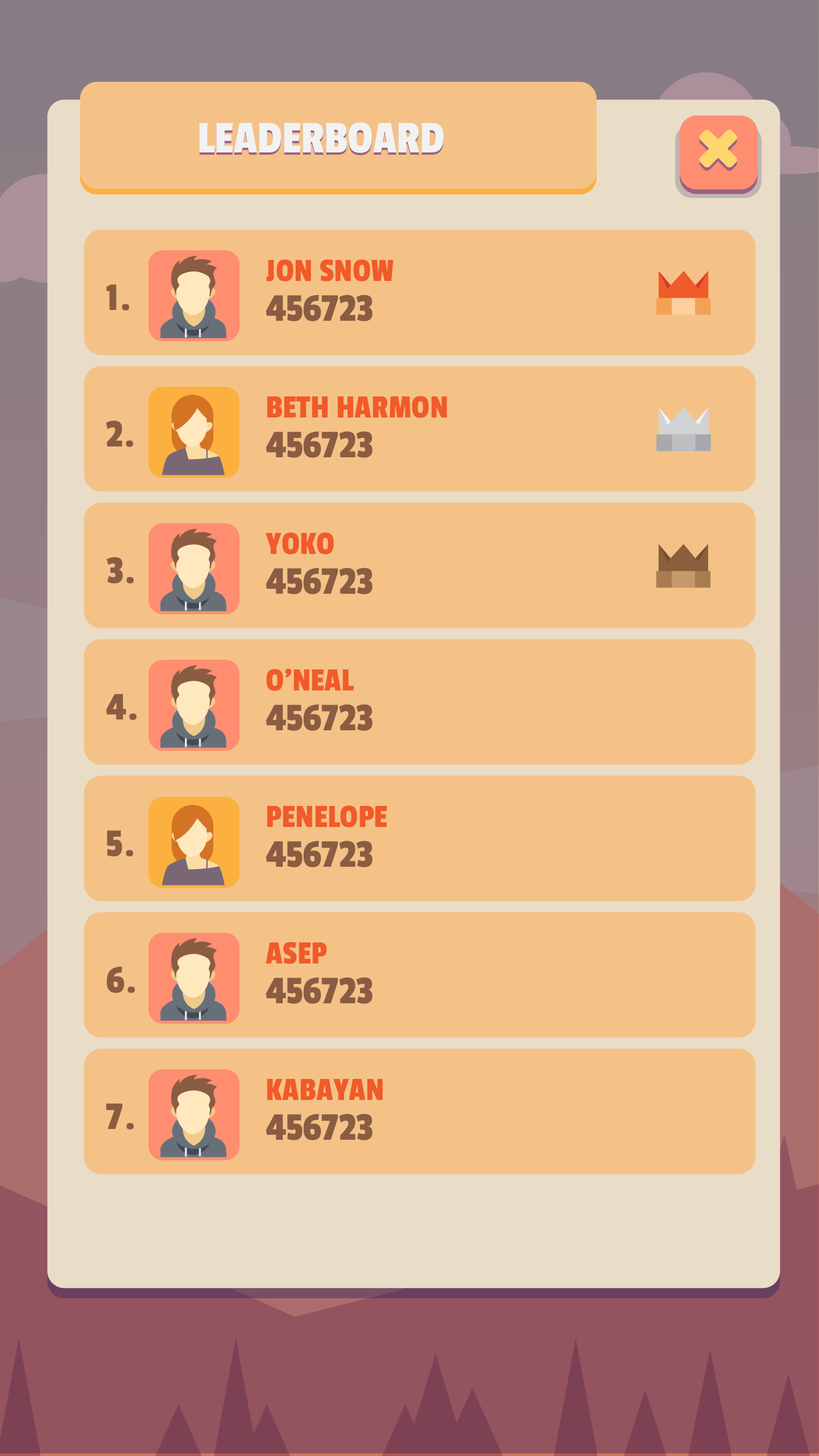
<style>
.page{position:relative;width:819px;height:1456px;background:#f4c287}
.page>*{position:absolute;margin:0}
.t1{font:47.2px "PassionOne-Regular";color:#ffffff}
.t2{font:47.2px "PassionOne-Regular";color:#f1f2f2}
.t3{font:34px "PassionOne-Regular";color:#f15a29}
.t4{font:40.9px "PassionOne-Regular";color:#8a5c42}
</style>
<div class="page">
<p class="t1" style="left:199px;top:122px;width:245px;height:31px">LEADERBOARD</p>
<p class="t2" style="left:199px;top:125px;width:245px;height:30px">LEADERBOARD</p>
<p class="t2" style="left:199px;top:122px;width:245px;height:31px">LEADERBOARD</p>
<p class="t3" style="left:266px;top:259px;width:128px;height:23px">JON SNOW</p>
<p class="t4" style="left:106px;top:284px;width:23px;height:27px">1.</p>
<p class="t4" style="left:266px;top:295px;width:107px;height:26px">456723</p>
<p class="t3" style="left:267px;top:396px;width:180px;height:22px">BETH HARMON</p>
<p class="t4" style="left:106px;top:420px;width:27px;height:27px">2.</p>
<p class="t4" style="left:266px;top:431px;width:107px;height:27px">456723</p>
<p class="t3" style="left:266px;top:532px;width:68px;height:23px">YOKO</p>
<p class="t4" style="left:106px;top:557px;width:28px;height:27px">3.</p>
<p class="t4" style="left:266px;top:568px;width:107px;height:26px">456723</p>
<p class="t3" style="left:266px;top:668px;width:88px;height:23px">O’NEAL</p>
<p class="t4" style="left:106px;top:694px;width:30px;height:26px">4.</p>
<p class="t4" style="left:266px;top:704px;width:107px;height:27px">456723</p>
<p class="t3" style="left:267px;top:805px;width:120px;height:23px">PENELOPE</p>
<p class="t4" style="left:107px;top:830px;width:26px;height:27px">5.</p>
<p class="t4" style="left:266px;top:841px;width:107px;height:26px">456723</p>
<p class="t3" style="left:266px;top:942px;width:61px;height:22px">ASEP</p>
<p class="t4" style="left:106px;top:966px;width:29px;height:27px">6.</p>
<p class="t4" style="left:266px;top:977px;width:107px;height:27px">456723</p>
<p class="t3" style="left:267px;top:1079px;width:116px;height:21px">KABAYAN</p>
<p class="t4" style="left:106px;top:1103px;width:28px;height:27px">7.</p>
<p class="t4" style="left:266px;top:1114px;width:107px;height:26px">456723</p>
</div>
